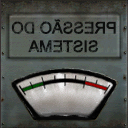
<style>
.page{position:relative;width:128px;height:128px}
.page>*{position:absolute;margin:0}
.t1{font:15.9px/18.6px "ArialMT";letter-spacing:-0.02em;color:#000000;text-transform:uppercase;font-weight:bold}
</style>
<div class="page">
<p class="t1" style="left:11px;top:19px;width:105px;height:34px;text-align:center;rotate:180deg;opacity:0.9">PRESSÃO DO<br>SISTEMA</p>
</div>
